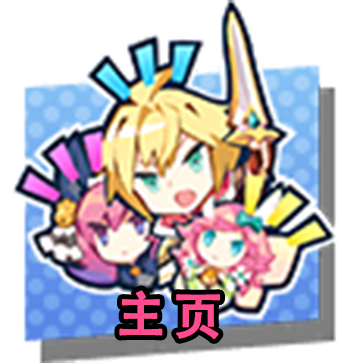
<style>
.page{position:relative;width:363px;height:363px;background:#ffffff}
.page>*{position:absolute;margin:0}
.t1{font:50.4px "AdobeHeitiStd-Regular";letter-spacing:0.1em;color:#ff4c8f;font-weight:bold}
</style>
<div class="page">
<p class="t1" style="left:119px;top:290px;width:101px;height:49px">主页</p>
</div>
